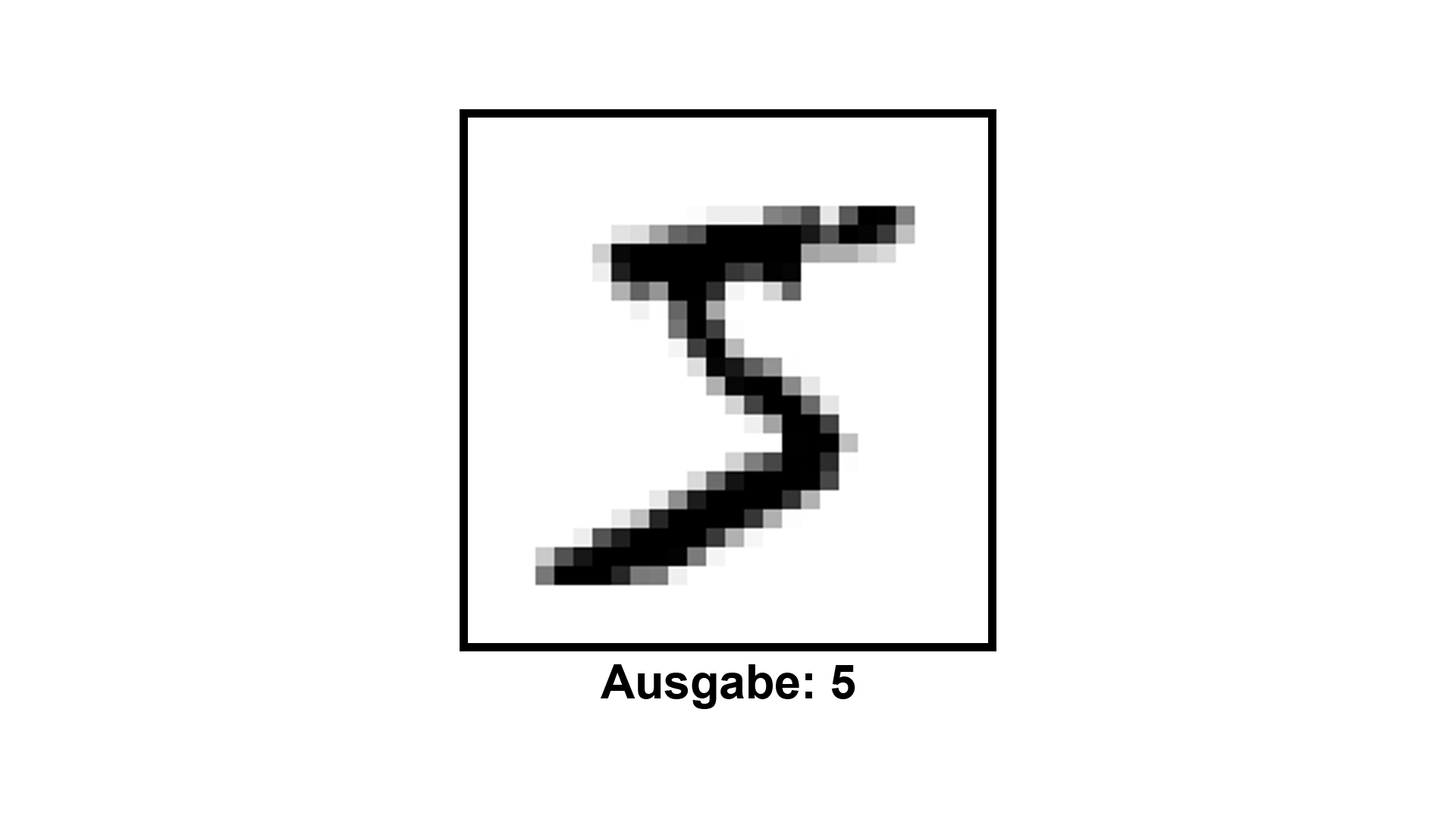
<style>
.page{position:relative;width:1456px;height:819px;background:#ffffff}
.page>*{position:absolute;margin:0}
.t1{font:47.4px "Arial-BoldMT";color:#000000}
</style>
<div class="page">
<p class="t1" style="left:601px;top:664px;width:254px;height:45px">Ausgabe: 5</p>
</div>
